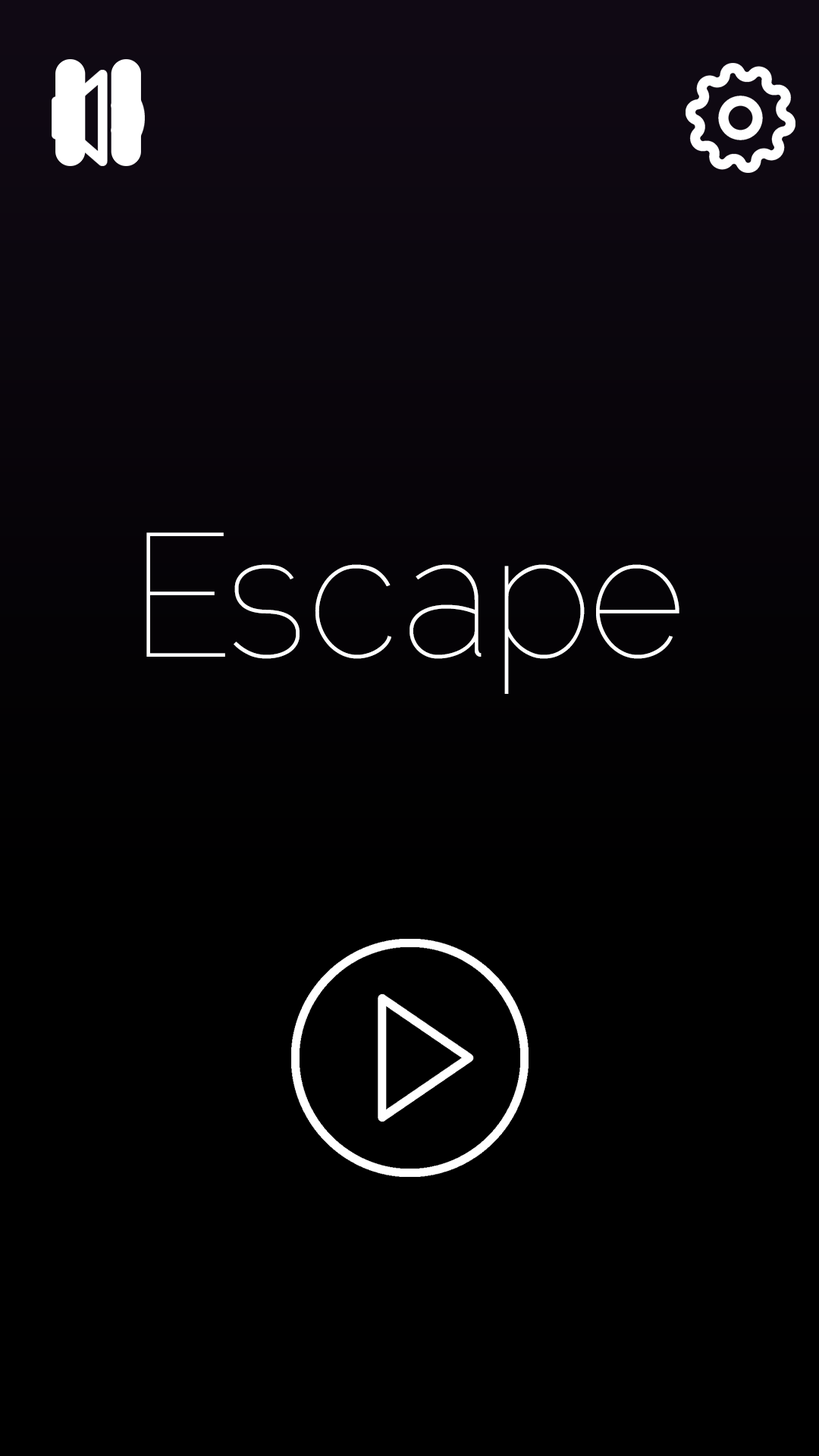
<style>
.page{position:relative;width:819px;height:1456px;background:#000000}
.page>*{position:absolute;margin:0}
.t1{font:174.6px "Raleway-Thin";color:#ffffff;scale:0.96 1}
</style>
<div class="page">
<p class="t1" style="left:146px;top:532px;width:533px;height:162px">Escape</p>
</div>
